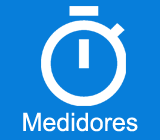
<style>
.page{position:relative;width:160px;height:140px;background:#077eda}
.page>*{position:absolute;margin:0}
.t1{font:25px "ArialMT";color:#ffffff}
</style>
<div class="page">
<p class="t1" style="left:23px;top:112px;width:115px;height:20px">Medidores</p>
</div>
